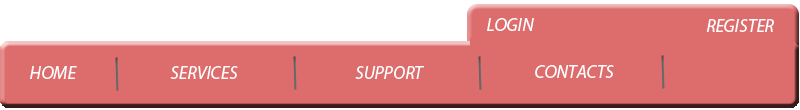
<style>
.page{position:relative;width:800px;height:110px;background:#dd6c6c}
.page>*{position:absolute;margin:0}
.t1{font:18px "MyriadPro-It";color:#ffffff}
.t2{font:18px "MyriadPro-It";color:#fefefe}
</style>
<div class="page">
<p class="t1" style="left:487px;top:18px;width:47px;height:13px">LOGIN</p>
<p class="t1" style="left:706px;top:19px;width:68px;height:13px">REGISTER</p>
<p class="t2" style="left:535px;top:65px;width:79px;height:13px">CONTACTS</p>
<p class="t2" style="left:30px;top:66px;width:47px;height:13px">HOME</p>
<p class="t2" style="left:170px;top:66px;width:68px;height:13px">SERVICES</p>
<p class="t2" style="left:355px;top:66px;width:69px;height:13px">SUPPORT</p>
</div>
